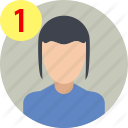
<style>
.page{position:relative;width:128px;height:128px;background:#c6c8b9}
.page>*{position:absolute;margin:0}
.t1{font:34px "MyriadPro-BoldCond";color:#ef0000}
</style>
<div class="page">
<p class="t1" style="left:14px;top:9px;width:10px;height:23px">1</p>
</div>
